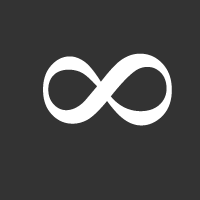
<style>
.page{position:relative;width:200px;height:200px;background:#333333}
.page>*{position:absolute;margin:0}
.t1{font:186.8px "TimesNewRomanPSMT";color:#ffffff}
</style>
<div class="page">
<p class="t1" style="left:43px;top:53px;width:129px;height:73px;rotate:-90deg">8</p>
</div>
